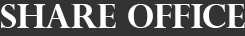
<style>
.page{position:relative;width:245px;height:36px;background:#333333}
.page>*{position:absolute;margin:0}
.t1{font:32.6px "PerpetuaTitlingMT-Bold";color:#ffffff}
</style>
<div class="page">
<p class="t1" style="left:1px;top:4px;width:244px;height:24px">Share Office</p>
</div>
